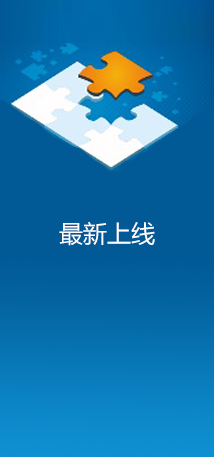
<style>
.page{position:relative;width:214px;height:457px;background:#015a96}
.page>*{position:absolute;margin:0}
.t1{font:24px "MicrosoftYaHei";color:#fffffe}
</style>
<div class="page">
<p class="t1" style="left:59px;top:221px;width:96px;height:25px">最新上线</p>
</div>
